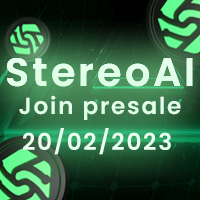
<style>
.page{position:relative;width:200px;height:200px}
.page>*{position:absolute;margin:0}
.t1{font:39.7px "Poppins-SemiBold";letter-spacing:0.075em;color:#e8ffef}
.t2{font:23.2px "Poppins-SemiBold";letter-spacing:0.075em;color:#e8ffef}
</style>
<div class="page">
<p class="t1" style="left:7px;top:58px;width:186px;height:29px">StereoAI</p>
<p class="t1" style="left:7px;top:58px;width:186px;height:29px">StereoAI</p>
<p class="t2" style="left:19px;top:95px;width:162px;height:25px">Join presale</p>
<p class="t2" style="left:23px;top:128px;width:148px;height:27px">20/02/2023</p>
</div>
